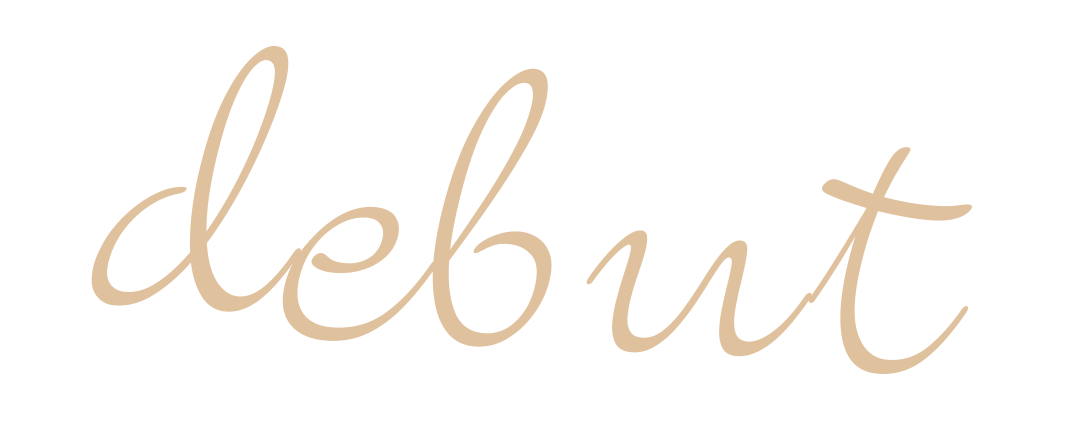
<style>
.page{position:relative;width:1075px;height:427px;background:#ffffff}
.page>*{position:absolute;margin:0}
.t1{font:350px "Ballare-Regular";letter-spacing:0.02em;color:#dfc19d;font-style:italic;scale:0.83 1}
</style>
<div class="page">
<p class="t1" style="left:91px;top:45px;width:881px;height:329px;rotate:5deg">debut</p>
</div>
